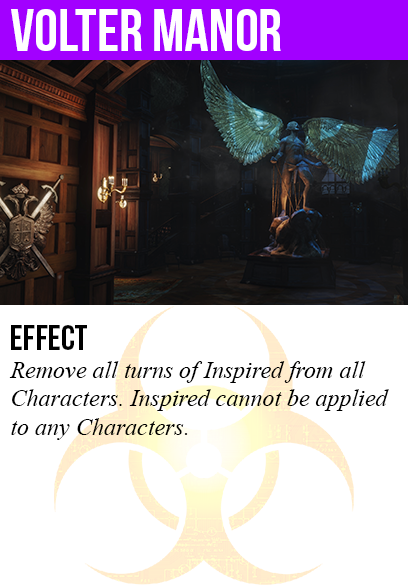
<style>
.page{position:relative;width:408px;height:585px;background:#ffffff}
.page>*{position:absolute;margin:0}
.t1{font:60px "BebasNeue";color:#ffffff}
.t2{font:36px "BebasNeue";color:#000000}
.t3{font:24px "TimesNewRomanPS-ItalicMT";color:#000000}
</style>
<div class="page">
<p class="t1" style="left:11px;top:9px;width:270px;height:42px">volter manor</p>
<p class="t2" style="left:11px;top:325px;width:76px;height:25px">Effect</p>
<p class="t3" style="left:9px;top:361px;width:380px;height:79px">Remove all turns of Inspired from all<br>Characters. Inspired cannot be applied<br>to any Characters.</p>
</div>
